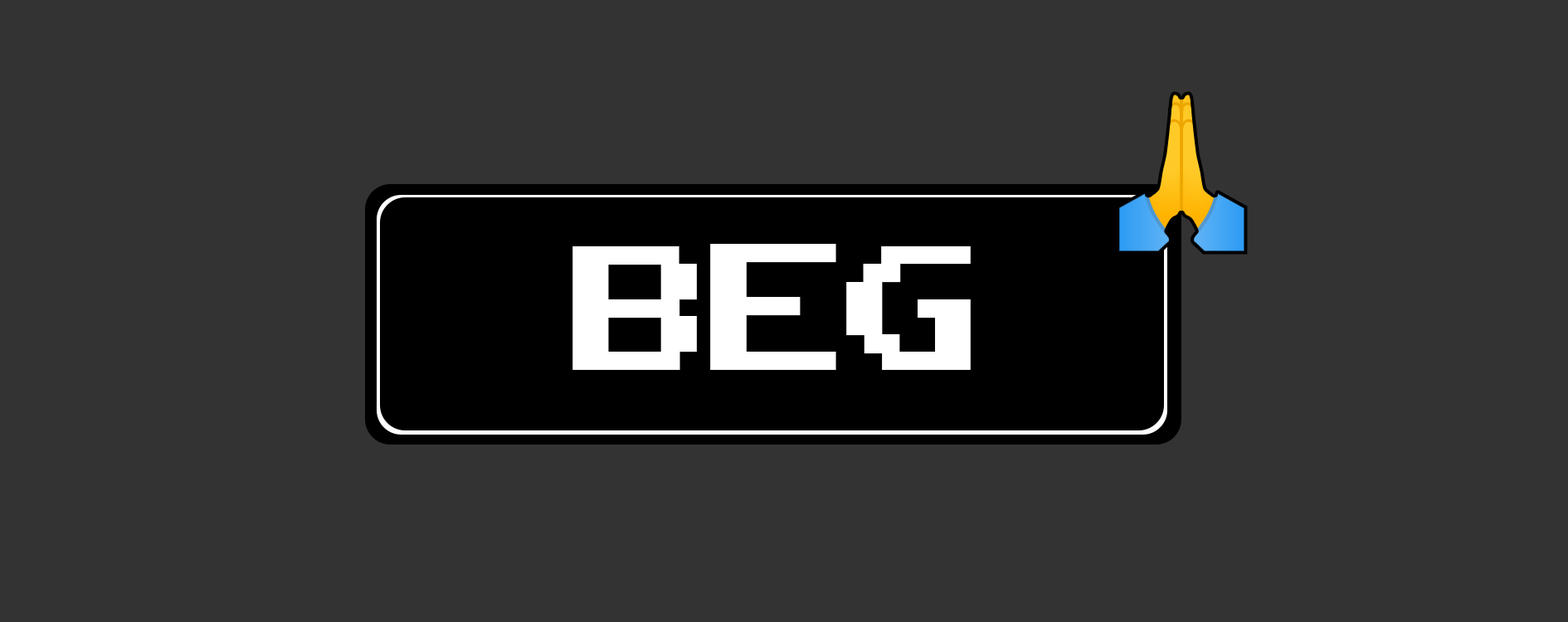
<style>
.page{position:relative;width:1568px;height:622px;background:#333333}
.page>*{position:absolute;margin:0}
.t1{font:248.9px "ArcadeClassic";color:#ffffff}
</style>
<div class="page">
<p class="t1" style="left:572px;top:244px;width:399px;height:126px">BEG</p>
</div>
